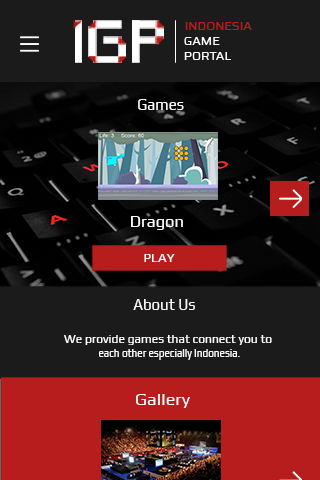
<style>
.page{position:relative;width:320px;height:480px;background:#1c1b1b}
.page>*{position:absolute;margin:0}
.t1{font:11.7px "Saira-Regular";color:#b71c1c;scale:1.07 1}
.t2{font:11.7px "Saira-Regular";color:#ffffff;scale:1.07 1}
.t3{font:16.9px "Play-Regular";color:#ffffff;scale:0.89 1}
.t4{font:15.6px "Play-Regular";color:#ffffff;scale:1.07 1}
.t5{font:12.4px "Play-Regular";color:#fefefe;scale:1.07 1}
.t6{font:11.3px "Play-Regular";color:#ffffff;scale:1.07 1}
.t7{font:11.2px "Play-Regular";color:#ffffff;scale:0.89 1}
.t8{font:16.9px "Play-Regular";color:#ffffff;scale:1.07 1}
</style>
<div class="page">
<p class="t1" style="left:185px;top:22px;width:67px;height:8px">INDONESIA</p>
<p class="t2" style="left:184px;top:37px;width:36px;height:8px">GAME</p>
<p class="t2" style="left:184px;top:52px;width:47px;height:8px">PORTAL</p>
<p class="t3" style="left:138px;top:99px;width:46px;height:11px">Games</p>
<p class="t4" style="left:131px;top:216px;width:52px;height:14px">Dragon</p>
<p class="t5" style="left:144px;top:254px;width:31px;height:8px">PLAY</p>
<p class="t3" style="left:133px;top:299px;width:62px;height:11px">About Us</p>
<p class="t6" style="left:64px;top:335px;width:208px;height:10px">We provide games that connect you to</p>
<p class="t7" style="left:99px;top:349px;width:141px;height:11px">each other especially Indonesia.</p>
<p class="t8" style="left:136px;top:394px;width:54px;height:14px">Gallery</p>
</div>
